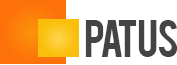
<style>
.page{position:relative;width:177px;height:65px;background:#ffffff}
.page>*{position:absolute;margin:0}
.t1{font:41px "Bebas";letter-spacing:-0.05em;color:#444444}
</style>
<div class="page">
<p class="t1" style="left:85px;top:20px;width:93px;height:37px">PATUS</p>
</div>
